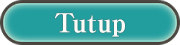
<style>
.page{position:relative;width:180px;height:45px;background:#239e9f}
.page>*{position:absolute;margin:0}
.t1{font:26px "RyuminPro-ExBold";color:#ffffff}
</style>
<div class="page">
<p class="t1" style="left:55px;top:13px;width:70px;height:24px">Tutup</p>
</div>
